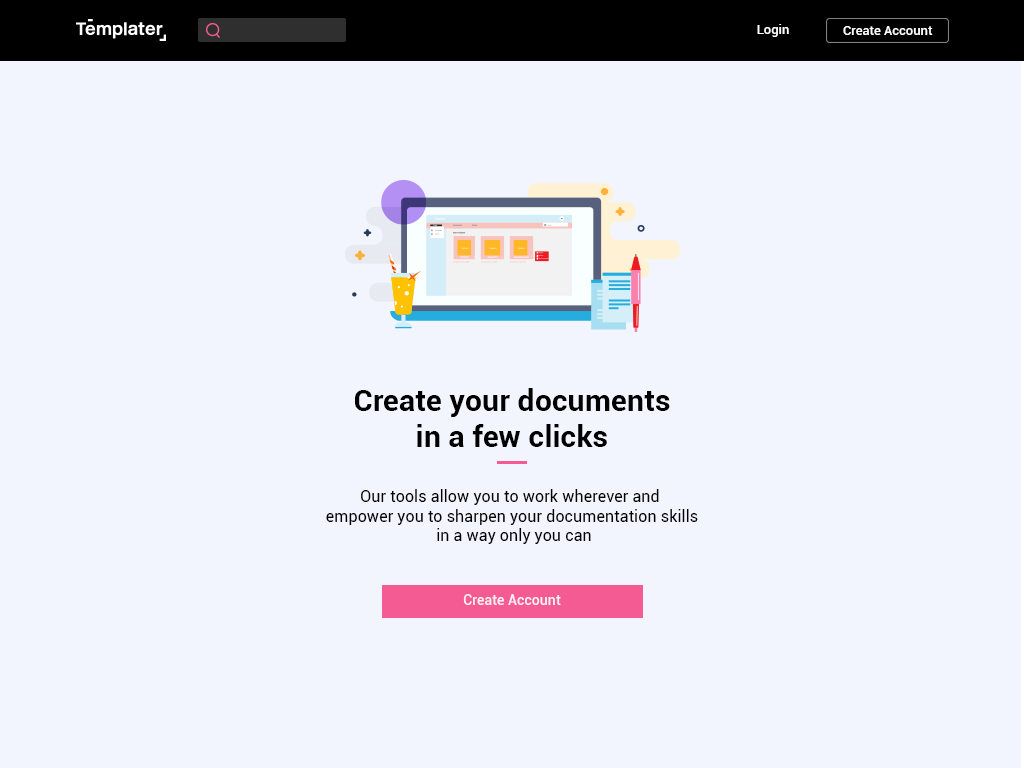
<style>
.page{position:relative;width:1024px;height:768px;background:#f2f5fe}
.page>*{position:absolute;margin:0}
.t1{font:13px "Roboto-Medium";color:#ffffff}
.t2{font:16px "Roboto-Regular";color:#000000}
.t3{font:30px "Roboto-Bold";color:#000000}
.t4{font:14px "Roboto-Medium";color:#ffffff}
</style>
<div class="page">
<p class="t1" style="left:757px;top:24px;width:32px;height:13px">Login</p>
<p class="t1" style="left:843px;top:26px;width:90px;height:9px">Create Account</p>
<p class="t2" style="left:326px;top:388px;width:372px;height:156px;text-align:center"><span class="t3">Create your documents<br>in a few clicks<br><br></span>Our tools allow you to work wherever and <br>empower you to sharpen your documentation skills<br> in a way only you can</p>
<p class="t4" style="left:463px;top:594px;width:98px;height:11px;opacity:0.89">Create Account</p>
</div>
